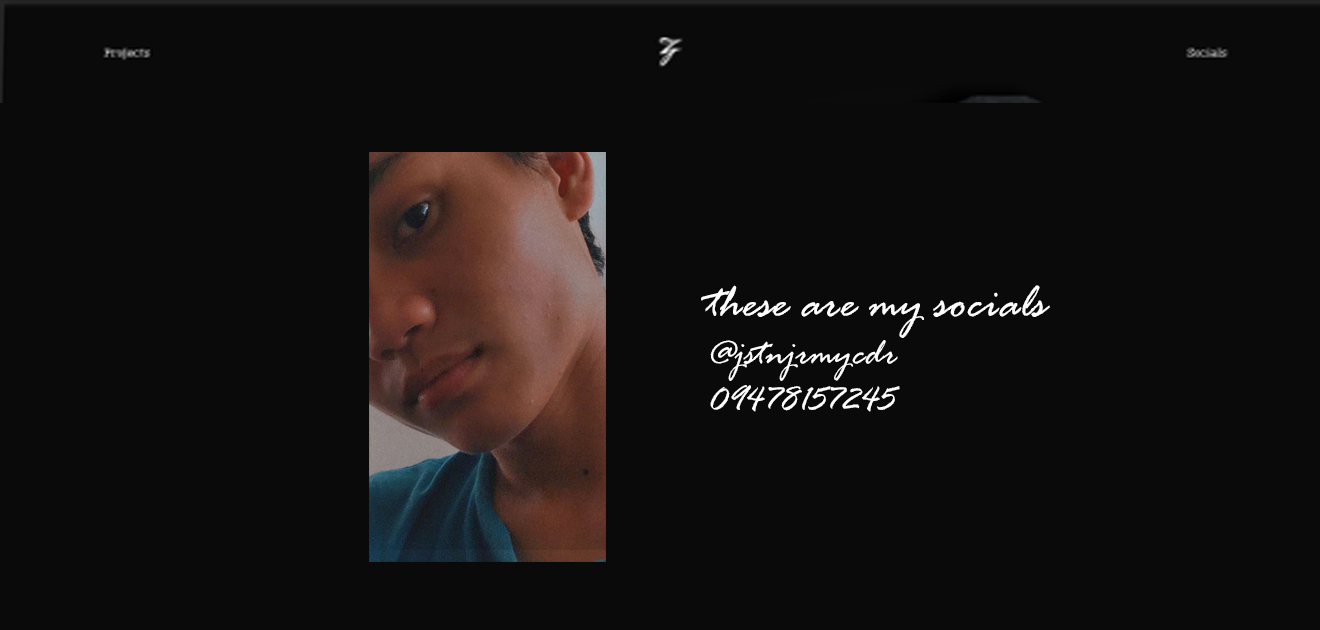
<style>
.page{position:relative;width:1320px;height:630px;background:#0a0a0a}
.page>*{position:absolute;margin:0}
.t1{font:39px "RageItalic";color:#fffefe}
.t2{font:50px "RageItalic";color:#fffefe}
</style>
<div class="page">
<p class="t1" style="left:701px;top:285px;width:349px;height:127px"><span class="t2">these are my socials<br></span>@jstnjrmycdr<br>09478157245</p>
</div>
